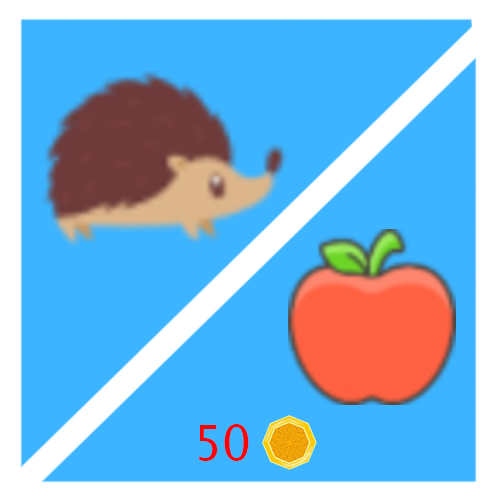
<style>
.page{position:relative;width:500px;height:500px;background:#3cb4ff}
.page>*{position:absolute;margin:0}
.t1{font:48px "LucidaConsole";color:#ff0101}
</style>
<div class="page">
<p class="t1" style="left:199px;top:424px;width:50px;height:37px">50</p>
</div>
